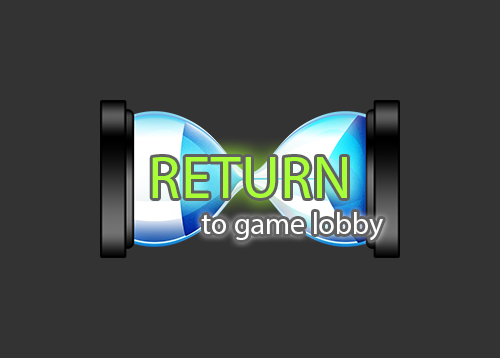
<style>
.page{position:relative;width:500px;height:358px;background:#333333}
.page>*{position:absolute;margin:0}
.t1{font:60px "MyriadPro-Regular";color:#a8ff37}
.t2{font:30px "MyriadPro-Regular";color:#ffffff}
</style>
<div class="page">
<p class="t1" style="left:152px;top:157px;width:195px;height:41px">RETURN</p>
<p class="t2" style="left:201px;top:212px;width:182px;height:29px">to game lobby</p>
</div>
